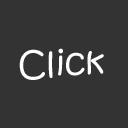
<style>
.page{position:relative;width:128px;height:128px;background:#333333}
.page>*{position:absolute;margin:0}
.t1{font:34px "KristenITC-Regular";color:#ffffff}
</style>
<div class="page">
<p class="t1" style="left:19px;top:48px;width:85px;height:32px">Click</p>
</div>
